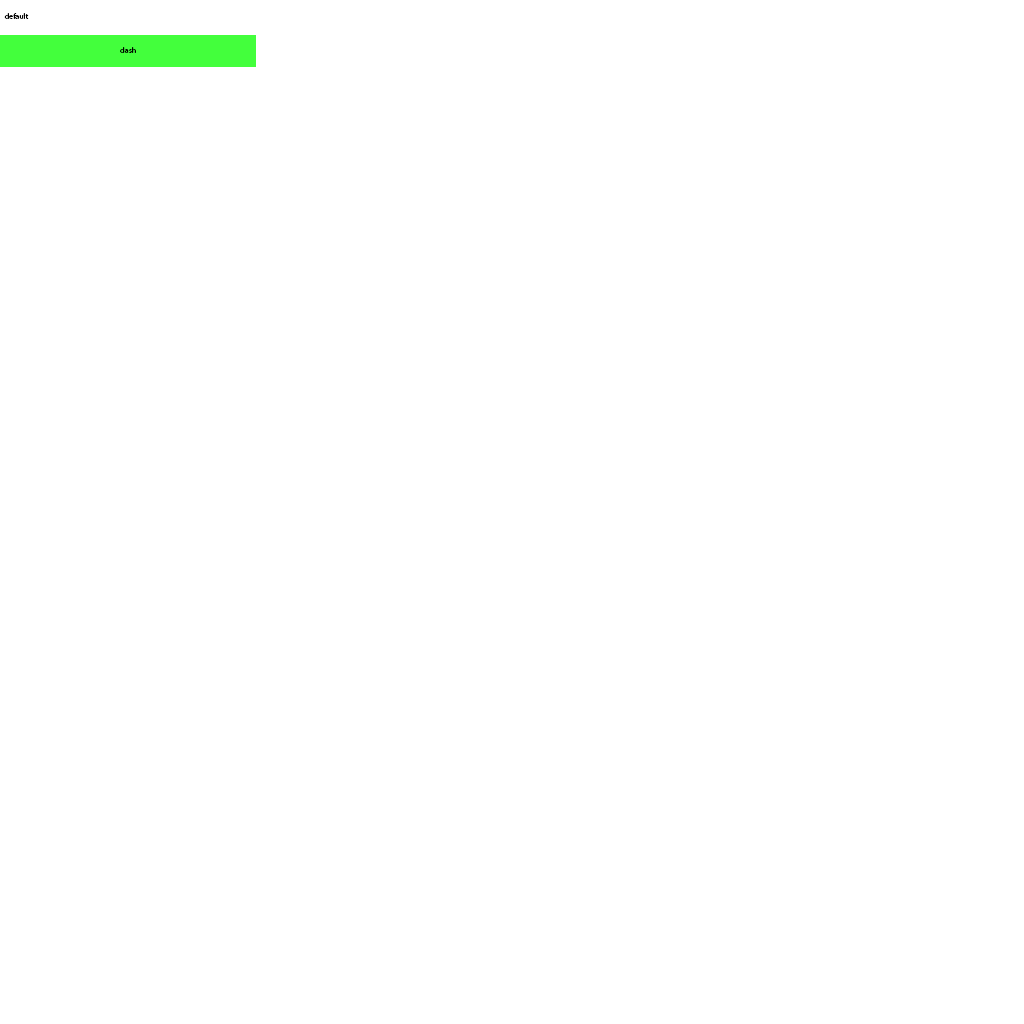
<style>
.page{position:relative;width:1024px;height:1024px;background:#ffffff}
.page>*{position:absolute;margin:0}
.t1{font:8px "MyriadPro-Regular";color:#000000}
</style>
<div class="page">
<p class="t1" style="left:4px;top:13px;width:25px;height:6px">default</p>
<p class="t1" style="left:120px;top:47px;width:16px;height:6px">dash</p>
</div>
